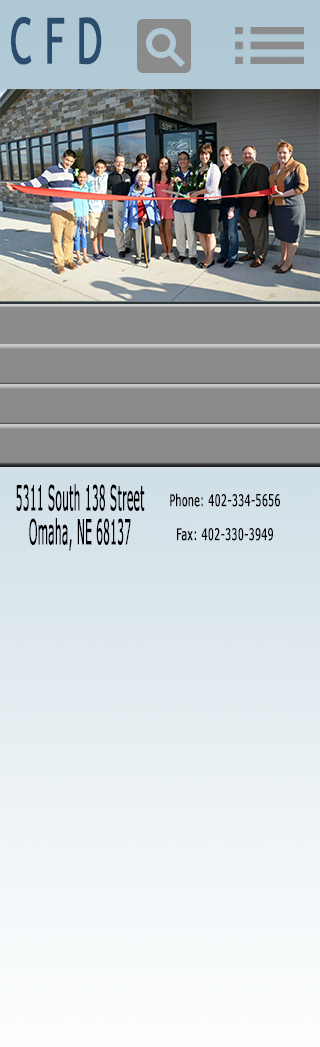
<style>
.page{position:relative;width:320px;height:1047px}
.page>*{position:absolute;margin:0}
.t1{font:64.8px "ABeeZee-Regular";letter-spacing:0.28em;color:#2b4c6d;font-weight:bold;scale:0.59 1}
.t2{font:34.2px/34px "Verdana";color:#000000;font-weight:bold;scale:0.31 1}
.t3{font:16.2px/34px "Verdana";color:#000000;font-weight:bold;scale:0.59 1}
.t4{font:34.2px/34px "Verdana";color:#000000;font-weight:bold;scale:0.59 1}
</style>
<div class="page">
<p class="t1" style="left:11px;top:17px;width:91px;height:48px">CFD</p>
<p class="t2" style="left:16px;top:484px;width:129px;height:67px;text-align:center">5311 South 138 Street<br>Omaha, NE 68137</p>
<p class="t3" style="left:170px;top:493px;width:110px;height:48px;text-align:center"><span class="t4"><br><br></span>Phone: 402-334-5656<br>Fax: 402-330-3949</p>
</div>
